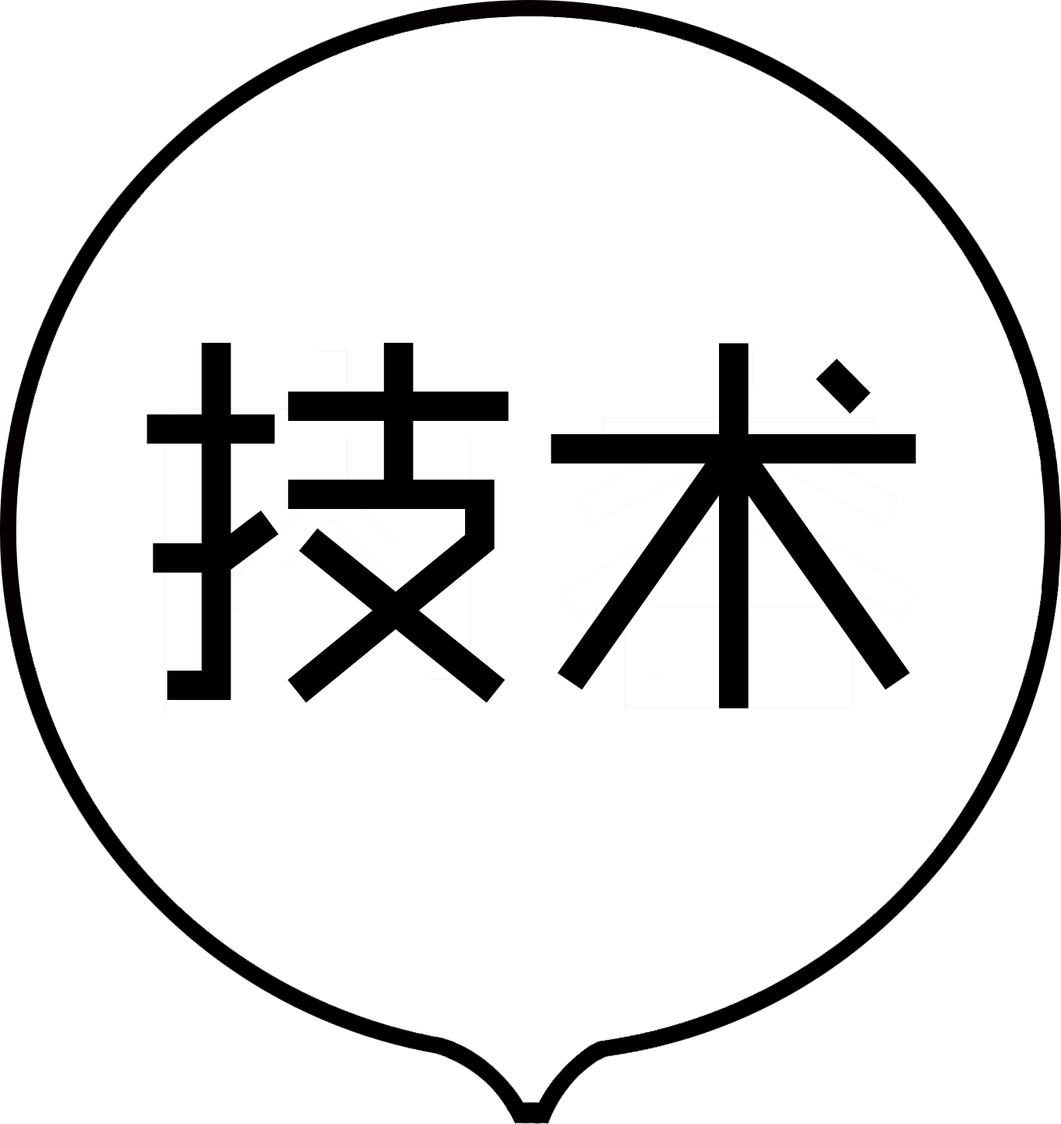
<style>
.page{position:relative;width:1061px;height:1124px;background:#ffffff}
.page>*{position:absolute;margin:0}
.t1{font:405.8px "RTWSShangGoG0v1-Regular";color:#000000}
</style>
<div class="page">
<p class="t1" style="left:146px;top:342px;width:770px;height:366px">技术</p>
</div>
